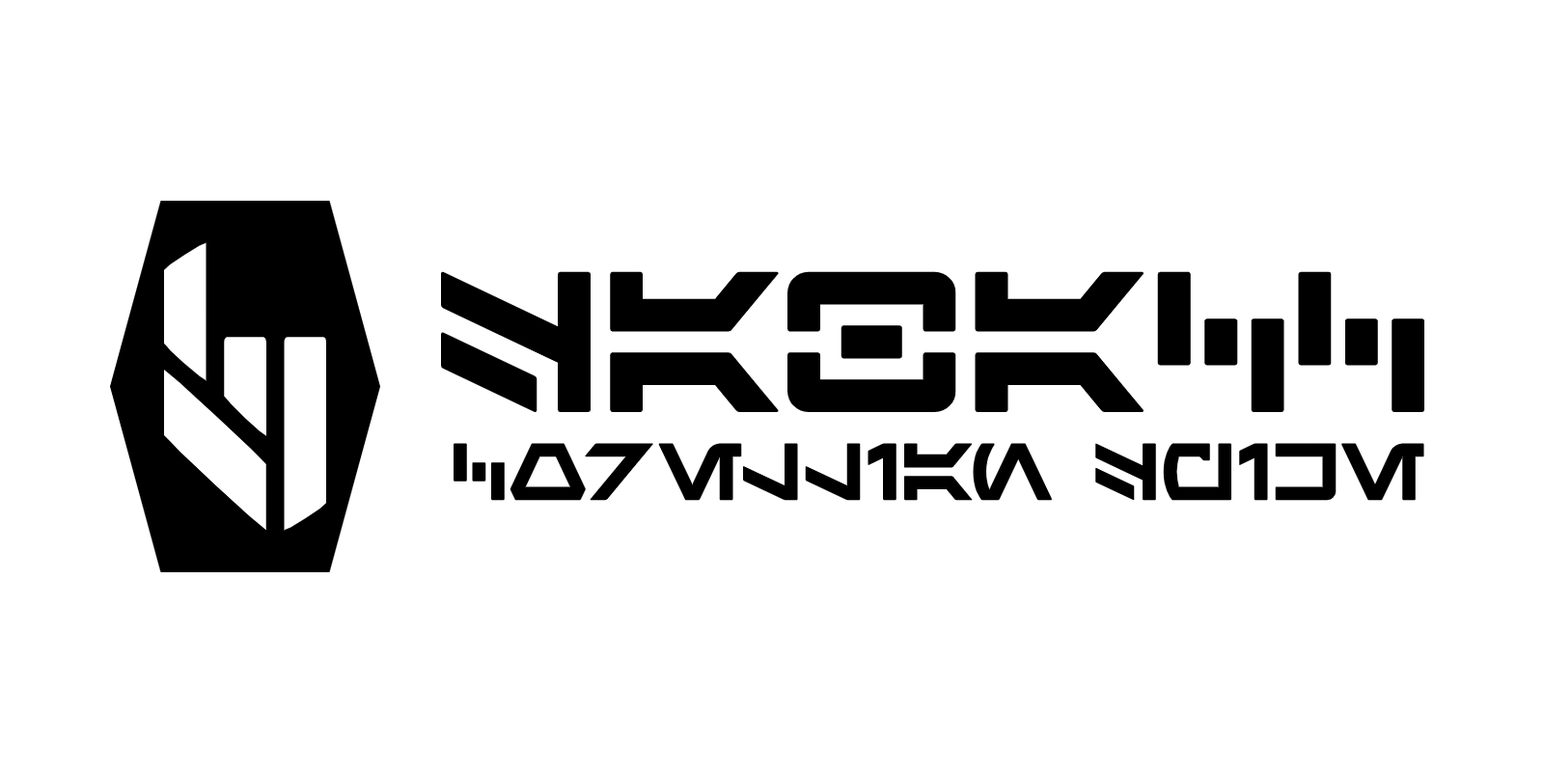
<style>
.page{position:relative;width:1544px;height:772px;background:#ffffff}
.page>*{position:absolute;margin:0}
.t1{font:160.2px "SaculBasic";color:#000000}
.t2{font:64.6px "SaculBasic";color:#000000}
</style>
<div class="page">
<p class="t1" style="left:440px;top:271px;width:986px;height:142px">Sabacc</p>
<p class="t2" style="left:454px;top:443px;width:971px;height:58px">corellian Spike</p>
</div>
